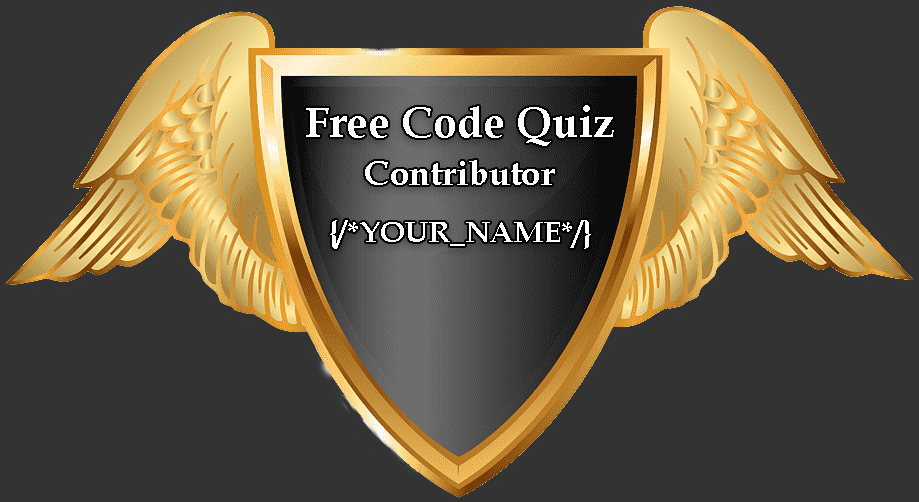
<style>
.page{position:relative;width:919px;height:502px;background:#333333}
.page>*{position:absolute;margin:0}
.t1{font:43.2px "BookAntiqua-Bold";color:#ffffff}
.t2{font:34.9px "BookAntiqua-Bold";color:#ffffff}
.t3{font:30px "BookAntiqua-Bold";color:#ffffff}
</style>
<div class="page">
<p class="t1" style="left:306px;top:105px;width:308px;height:41px">Free Code Quiz</p>
<p class="t2" style="left:365px;top:160px;width:190px;height:25px">Contributor</p>
<p class="t3" style="left:330px;top:220px;width:261px;height:29px">{/*YOUR_NAME*/}</p>
</div>
